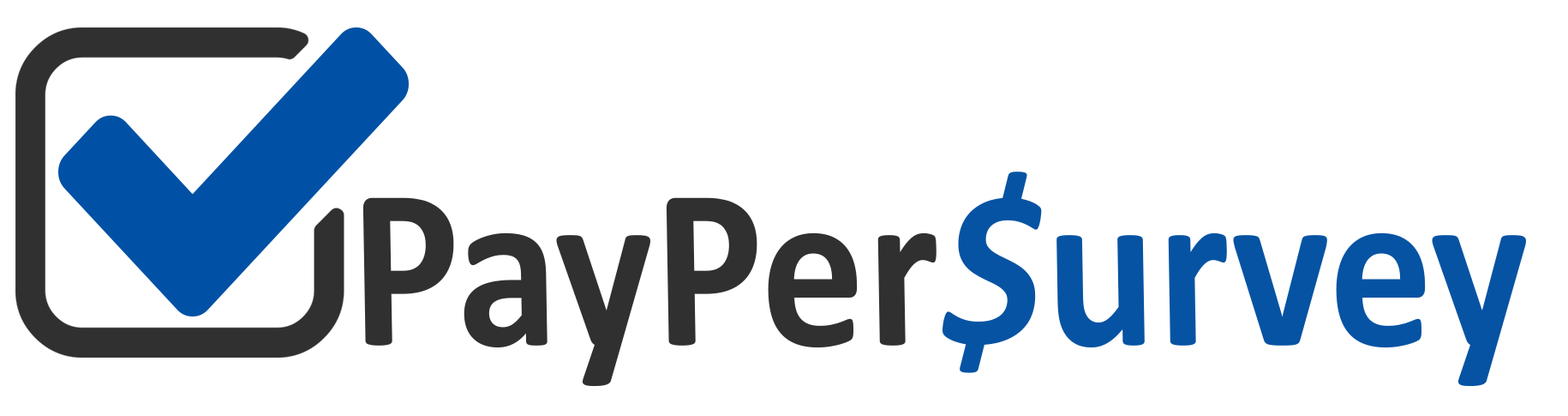
<style>
.page{position:relative;width:1568px;height:416px;background:#ffffff}
.page>*{position:absolute;margin:0}
.t1{font:231.8px "Calibri-Bold";color:#303030;scale:0.9 1}
.t2{font:231.8px "Calibri-BoldItalic";color:#0653a3;scale:0.9 1}
.t3{font:231.8px "Calibri-Bold";color:#0653a3;scale:0.9 1}
</style>
<div class="page">
<p class="t1" style="left:362px;top:171px;width:1164px;height:215px">PayPer<span class="t2">$</span><span class="t3">urvey</span></p>
</div>
